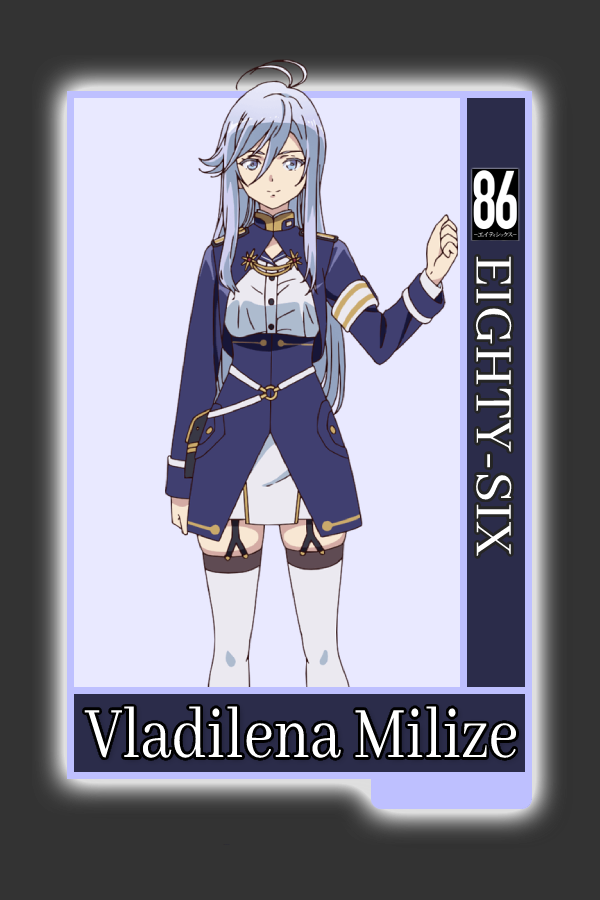
<style>
.page{position:relative;width:600px;height:900px;background:#e9e9ff}
.page>*{position:absolute;margin:0}
.t1{font:58.2px "AbhayaLibre-Regular";color:#ffffff}
.t2{font:79.6px "AbhayaLibre-Regular";color:#ffffff;scale:0.83 1}
</style>
<div class="page">
<p class="t1" style="left:476px;top:256px;width:36px;height:300px;rotate:90deg">EIGHTY-SIX</p>
<p class="t2" style="left:84px;top:706px;width:432px;height:52px">Vladilena Milize</p>
</div>
